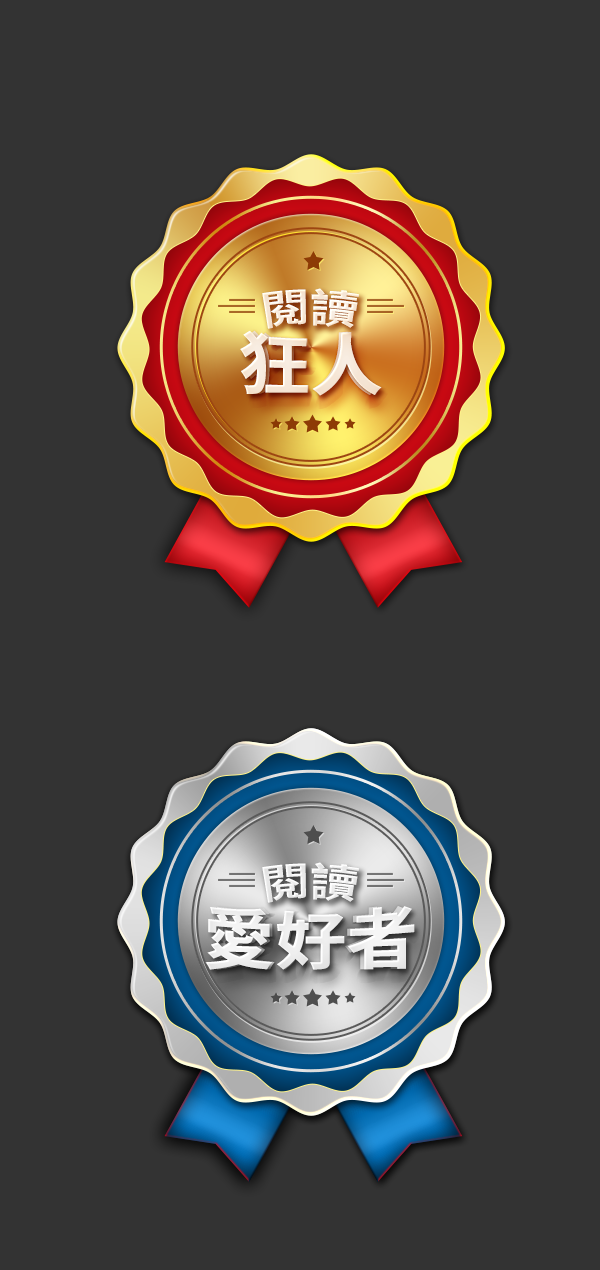
<style>
.page{position:relative;width:600px;height:1270px;background:#333333}
.page>*{position:absolute;margin:0}
.t1{font:38.3px "SourceHanSansTWHK-Bold";letter-spacing:0.01em;color:#fdefe0;text-transform:uppercase}
.t2{font:72.1px "SourceHanSansTWHK-Bold";color:#f7e9db;text-transform:uppercase}
.t3{font:72.1px "SourceHanSansTWHK-Bold";color:#f6e7d8;text-transform:uppercase;scale:0.93 1}
.t4{font:38.3px "SourceHanSansTWHK-Bold";letter-spacing:0.01em;color:#ffffff;text-transform:uppercase}
.t5{font:72.1px "SourceHanSansTWHK-Bold";color:#ffffff;text-transform:uppercase}
.t6{font:72.1px "SourceHanSansTWHK-Bold";color:#ffffff;text-transform:uppercase;scale:0.93 1}
</style>
<div class="page">
<p class="t1" style="left:262px;top:288px;width:97px;height:41px">閱讀</p>
<p class="t2" style="left:240px;top:330px;width:142px;height:66px">狂人</p>
<p class="t3" style="left:245px;top:330px;width:131px;height:66px">狂人</p>
<p class="t4" style="left:262px;top:862px;width:97px;height:41px">閱讀</p>
<p class="t5" style="left:205px;top:906px;width:210px;height:64px">愛好者</p>
<p class="t6" style="left:213px;top:906px;width:195px;height:64px">愛好者</p>
</div>
